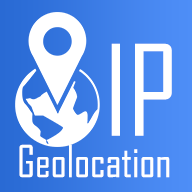
<style>
.page{position:relative;width:192px;height:192px;background:#ffffff}
.page>*{position:absolute;margin:0}
.t1{font:120px "AgencyFB-Reg";color:#ffffff}
.t2{font:42px "AgencyFB-Reg";color:#fefeff}
</style>
<div class="page">
<p class="t1" style="left:111px;top:43px;width:61px;height:93px">IP</p>
<p class="t2" style="left:19px;top:144px;width:151px;height:34px">Geolocation</p>
</div>
